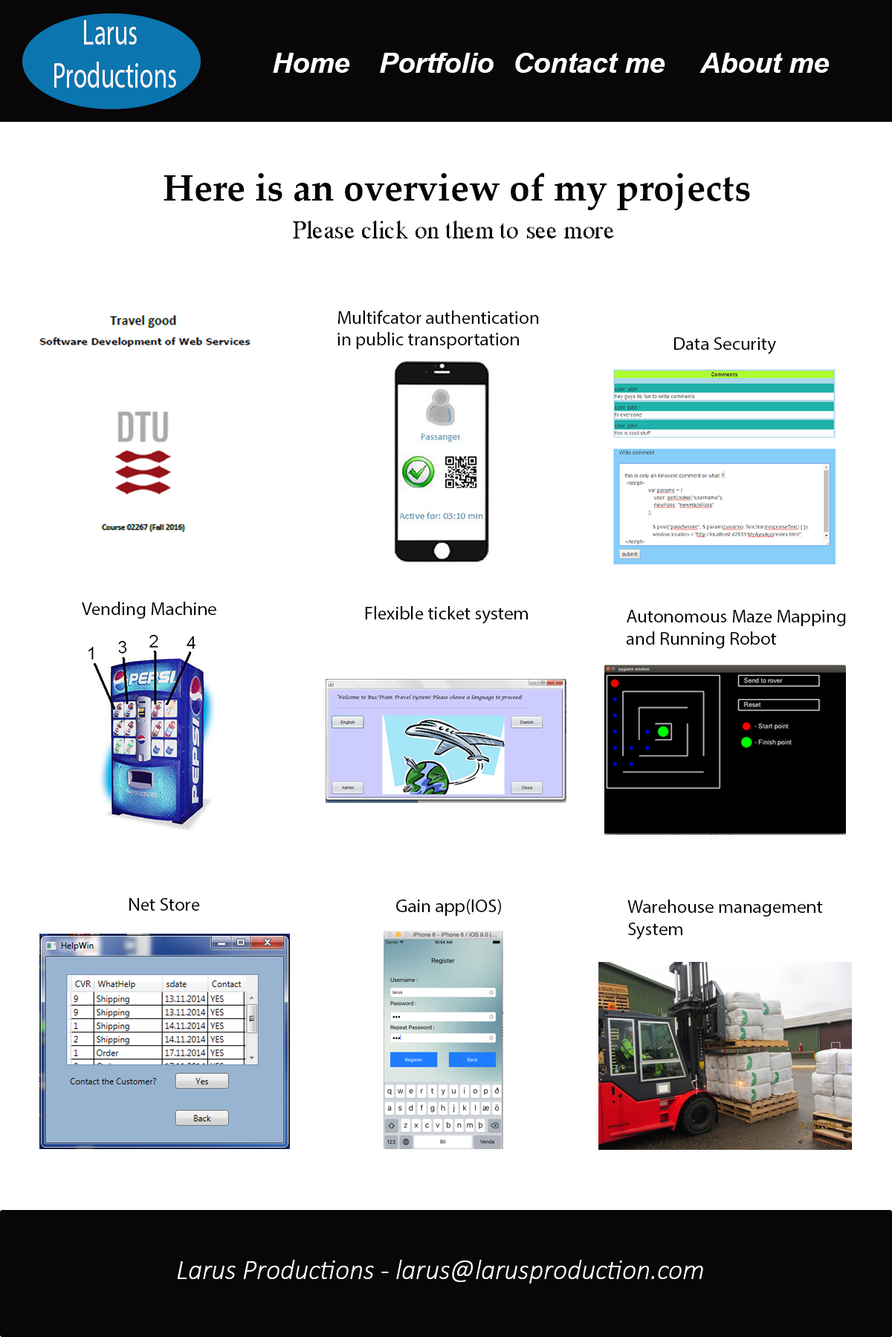
<style>
.page{position:relative;width:892px;height:1337px;background:#ffffff}
.page>*{position:absolute;margin:0}
.t1{font:35.9px "MyriadPro-Regular";color:#fef8f8;scale:0.69 1}
.t2{font:27.9px "Arial-BoldItalicMT";color:#ffffff}
.t3{font:8.9px "PalatinoLinotype-Bold";color:#030303}
.t4{font:24.8px "MS Serif";color:#030303}
.t5{font:18.6px "MyriadPro-Regular";color:#030303}
.t6{font:27.9px "Calibri-LightItalic";color:#ffffff}
</style>
<div class="page">
<p class="t1" style="left:54px;top:20px;width:122px;height:68px;text-align:center">Larus       Productions</p>
<p class="t2" style="left:273px;top:53px;width:556px;height:20px">Home  Portfolio Contact me   About me</p>
<p class="t3" style="left:163px;top:173px;width:587px;height:37px">Here is an overview of my projects</p>
<p class="t4" style="left:293px;top:221px;width:321px;height:18px">Please click on them to see more</p>
<p class="t5" style="left:337px;top:311px;width:202px;height:38px">Multifcator authentication <br>in public transportation</p>
<p class="t5" style="left:674px;top:337px;width:102px;height:17px">Data Security</p>
<p class="t5" style="left:82px;top:602px;width:134px;height:17px">Vending Machine</p>
<p class="t5" style="left:365px;top:606px;width:163px;height:18px">Flexible ticket system</p>
<p class="t5" style="left:626px;top:610px;width:220px;height:39px">Autonomous Maze Mapping <br>and Running Robot</p>
<p class="t5" style="left:129px;top:898px;width:71px;height:13px">Net Store</p>
<p class="t5" style="left:396px;top:899px;width:105px;height:17px">Gain app(IOS)</p>
<p class="t5" style="left:627px;top:900px;width:196px;height:40px">Warehouse management <br>System</p>
<p class="t6" style="left:177px;top:1260px;width:526px;height:24px">Larus Productions - larus@larusproduction.com</p>
</div>
